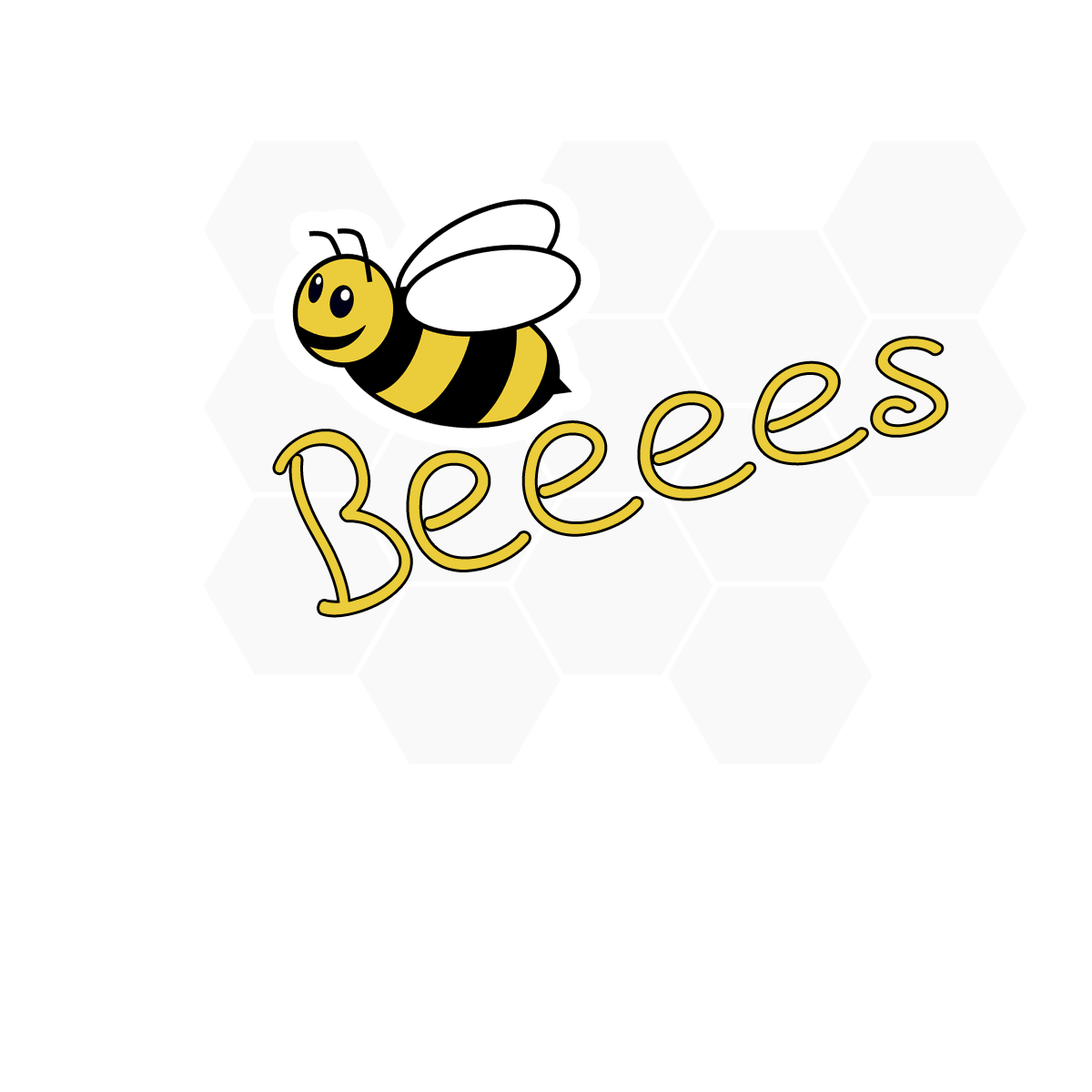
<style>
.page{position:relative;width:1092px;height:1092px;background:#ffffff}
.page>*{position:absolute;margin:0}
.t1{font:223.8px "Honeybee";color:#ebcc3a;scale:1.08 1}
</style>
<div class="page">
<p class="t1" style="left:275px;top:339px;width:671px;height:276px;rotate:-16deg">Beeees</p>
</div>
